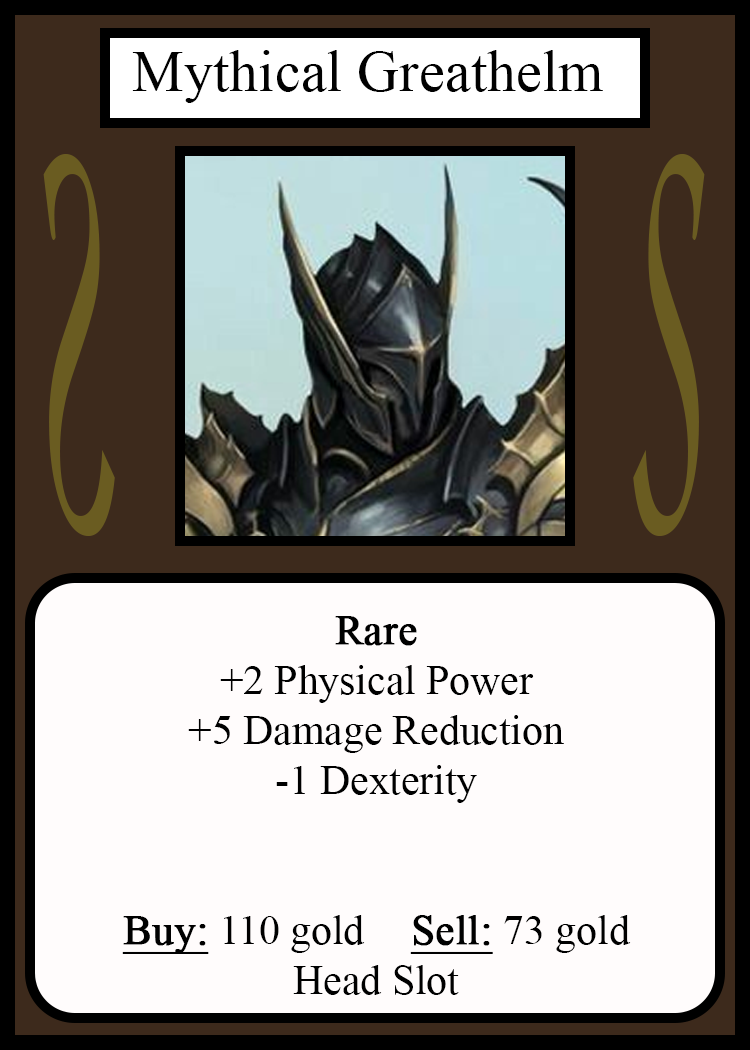
<style>
.page{position:relative;width:750px;height:1050px;background:#fffcfc}
.page>*{position:absolute;margin:0}
.t1{font:58.3px "TimesNewRomanPSMT";color:#010101}
.t2{font:548.5px "Apple-Chancery";color:#6a5c21;scale:0.27 1}
.t3{font:548.2px "Apple-Chancery";color:#6a5c21;scale:0.27 1}
.t4{font:41.7px "TimesNewRomanPSMT";color:#000000}
.t5{font:41.7px "TimesNewRomanPSMT";color:#000000;font-weight:bold}
.t6{font:41.7px "TimesNewRomanPSMT";color:#000000;font-weight:bold;text-decoration:underline}
</style>
<div class="page">
<p class="t1" style="left:132px;top:50px;width:471px;height:53px">Mythical Greathelm</p>
<p class="t2" style="left:43px;top:154px;width:72px;height:382px;rotate:180deg">S</p>
<p class="t3" style="left:633px;top:154px;width:72px;height:382px">S</p>
<p class="t4" style="left:122px;top:616px;width:509px;height:379px;text-align:center"><span class="t5">Rare<br></span>+2 Physical Power<br>+5 Damage Reduction<br>-1 Dexterity<br><br><br><span class="t6">Buy:</span> 110 gold   <span class="t6">Sell:</span> 73 gold<br>Head Slot</p>
</div>
